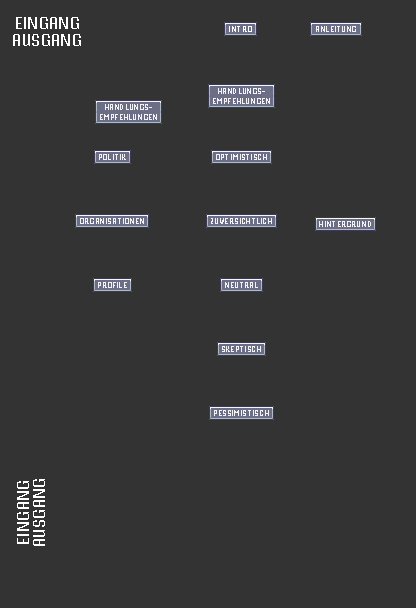
<style>
.page{position:relative;width:416px;height:608px;background:#333333}
.page>*{position:absolute;margin:0}
.t1{font:16.7px/16.7px "VTFMisterPixel";color:#ffffff;text-transform:uppercase}
.t2{font:8.3px "VTFMisterPixel";color:#ffffff;text-transform:uppercase}
.t3{font:8.3px "VTFMisterPixel";color:#ffffff}
</style>
<div class="page">
<p class="t1" style="left:13px;top:17px;width:68px;height:29px;text-align:center">eingang<br>ausgang</p>
<p class="t2" style="left:229px;top:26px;width:23px;height:6px">Intro</p>
<p class="t3" style="left:316px;top:26px;width:40px;height:6px;opacity:0.9">ANLEITUNG</p>
<p class="t2" style="left:213px;top:88px;width:57px;height:16px;text-align:center;opacity:0.9">Handlungs-<br>empfehlungen</p>
<p class="t2" style="left:100px;top:104px;width:57px;height:16px;text-align:center;opacity:0.9">Handlungs-<br>empfehlungen</p>
<p class="t2" style="left:99px;top:154px;width:27px;height:6px;opacity:0.9">Politik</p>
<p class="t2" style="left:216px;top:154px;width:51px;height:6px;opacity:0.9">optimistisch</p>
<p class="t2" style="left:80px;top:218px;width:64px;height:6px;opacity:0.9">organisationen</p>
<p class="t2" style="left:211px;top:218px;width:61px;height:6px;opacity:0.9">zuversichtlich</p>
<p class="t3" style="left:319px;top:221px;width:52px;height:6px;opacity:0.9">HINTERGRUND</p>
<p class="t2" style="left:98px;top:282px;width:29px;height:6px;opacity:0.9">Profile</p>
<p class="t2" style="left:225px;top:282px;width:33px;height:6px;opacity:0.9">Neutral</p>
<p class="t2" style="left:222px;top:346px;width:39px;height:6px;opacity:0.9">skeptisch</p>
<p class="t2" style="left:214px;top:410px;width:55px;height:6px;opacity:0.9">pessimistisch</p>
<p class="t1" style="left:17px;top:479px;width:28px;height:67px;text-align:center;rotate:-90deg">eingang<br>ausgang</p>
</div>
